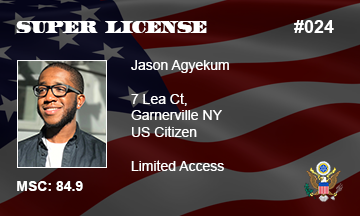
<style>
.page{position:relative;width:360px;height:216px}
.page>*{position:absolute;margin:0}
.t1{font:16px "UnitedStates";color:#ffffff}
.t2{font:18px "Arial-BoldMT";color:#ffffff}
.t3{font:14px "ArialMT";color:#ffffff}
.t4{font:14px "Arial-BoldMT";color:#ffffff}
</style>
<div class="page">
<p class="t1" style="left:16px;top:21px;width:191px;height:12px">SUPER  LICENSE</p>
<p class="t2" style="left:294px;top:20px;width:40px;height:13px">#024</p>
<p class="t3" style="left:131px;top:60px;width:98px;height:111px">Jason Agyekum<br><br>7 Lea Ct,<br>Garnerville NY<br>US Citizen<br><br>Limited Access</p>
<p class="t4" style="left:17px;top:181px;width:66px;height:10px">MSC: 84.9</p>
</div>
